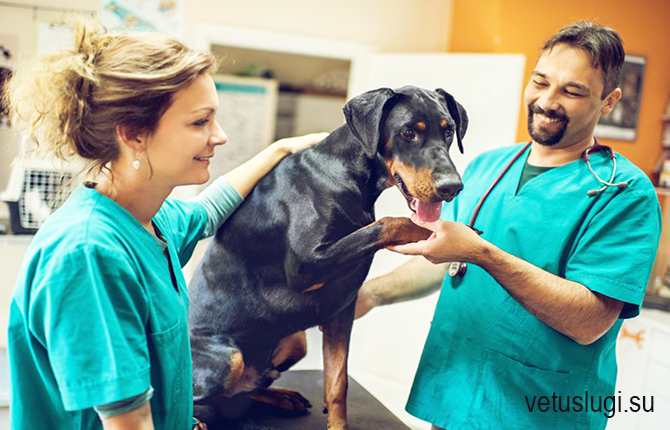
<style>
.page{position:relative;width:670px;height:430px}
.page>*{position:absolute;margin:0}
.t1{font:30px "ArialNarrow";letter-spacing:0.002em;color:#121314}
</style>
<div class="page">
<p class="t1" style="left:525px;top:391px;width:129px;height:27px">vetuslugi.su</p>
</div>
